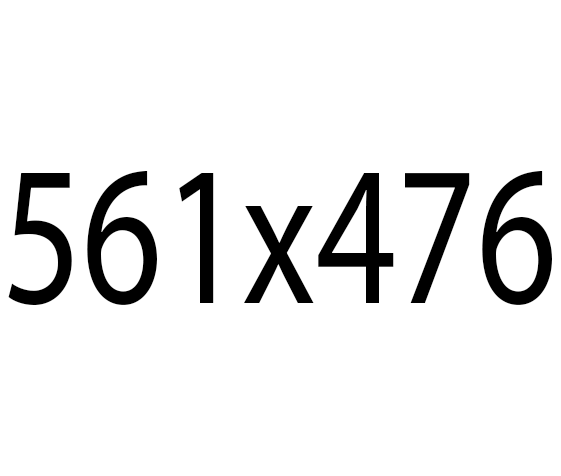
<style>
.page{position:relative;width:561px;height:476px;background:#ffffff}
.page>*{position:absolute;margin:0}
.t1{font:200px "MyriadPro-Regular";color:#000000;scale:0.78 1}
</style>
<div class="page">
<p class="t1" style="left:8px;top:170px;width:544px;height:135px">561x476</p>
</div>
